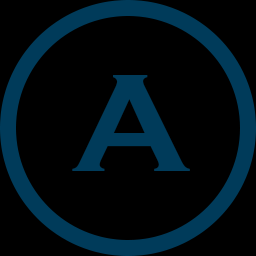
<style>
.page{position:relative;width:256px;height:256px;background:#000000}
.page>*{position:absolute;margin:0}
.t1{font:144px "CopperplateGothic-Bold";letter-spacing:0.05em;color:#003b5a}
</style>
<div class="page">
<p class="t1" style="left:72px;top:75px;width:118px;height:96px">A</p>
</div>
